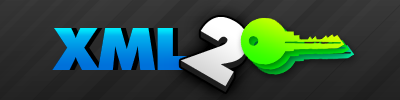
<style>
.page{position:relative;width:400px;height:100px}
.page>*{position:absolute;margin:0}
.t1{font:93.1px "FuturaPressPress";color:#edf1ed}
.t2{font:65.1px "FuturaPressPress"}
</style>
<div class="page">
<p class="t1" style="left:180px;top:17px;width:69px;height:70px;rotate:30deg">2</p>
<p class="t2" style="left:52px;top:28px;width:136px;height:42px">XML</p>
<p class="t2" style="left:52px;top:28px;width:136px;height:42px">XML</p>
<p class="t2" style="left:53px;top:28px;width:136px;height:42px">XML</p>
<p class="t2" style="left:54px;top:28px;width:136px;height:42px">XML</p>
<p class="t2" style="left:55px;top:28px;width:136px;height:42px">XML</p>
<p class="t2" style="left:56px;top:28px;width:136px;height:42px">XML</p>
</div>
